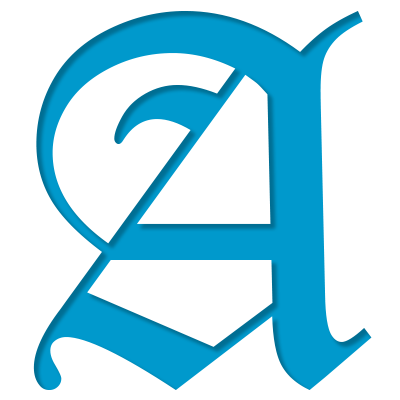
<style>
.page{position:relative;width:400px;height:400px;background:#ffffff}
.page>*{position:absolute;margin:0}
.t1{font:510.7px "OldEnglishTextMT";color:#0099cc}
</style>
<div class="page">
<p class="t1" style="left:33px;top:10px;width:339px;height:380px">A</p>
</div>
